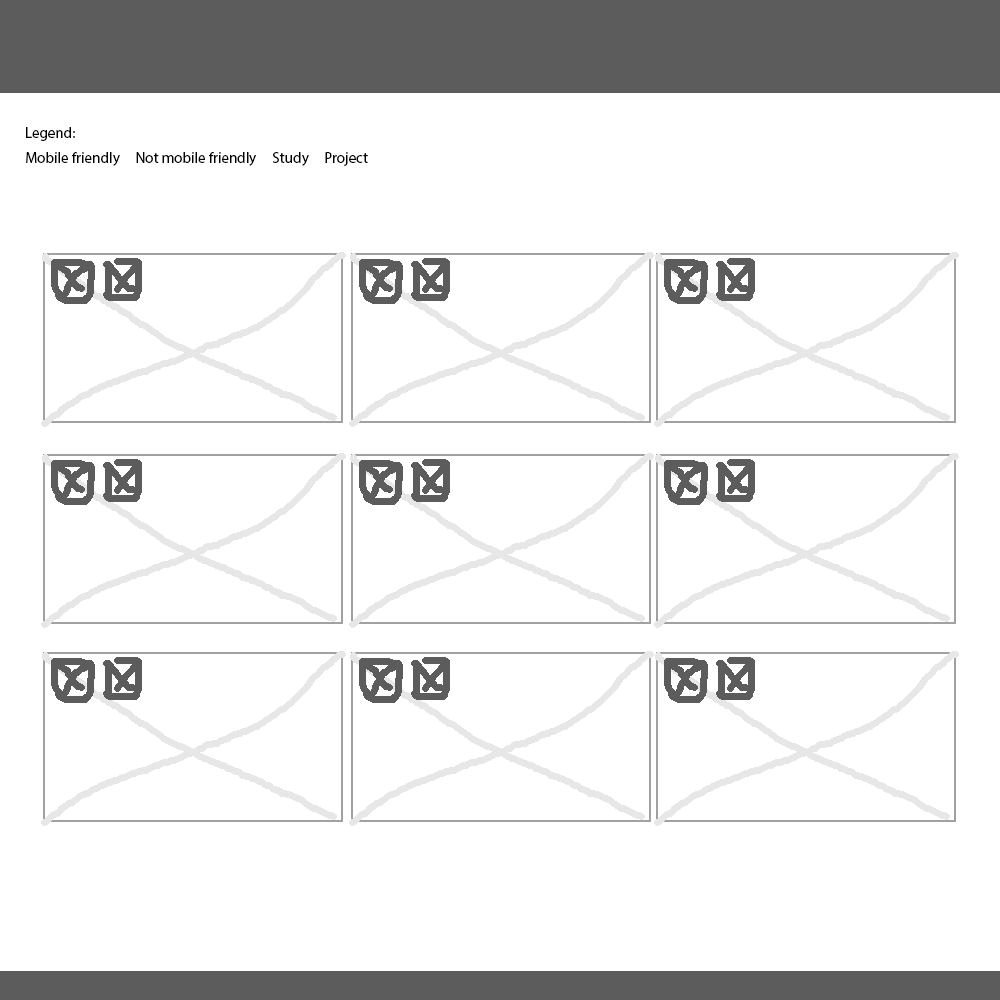
<style>
.page{position:relative;width:1000px;height:1000px;background:#ffffff}
.page>*{position:absolute;margin:0}
.t1{font:15px "MyriadPro-Regular";color:#000000}
</style>
<div class="page">
<p class="t1" style="left:26px;top:127px;width:342px;height:39px">Legend:<br>Mobile friendly     Not mobile friendly     Study     Project</p>
</div>
